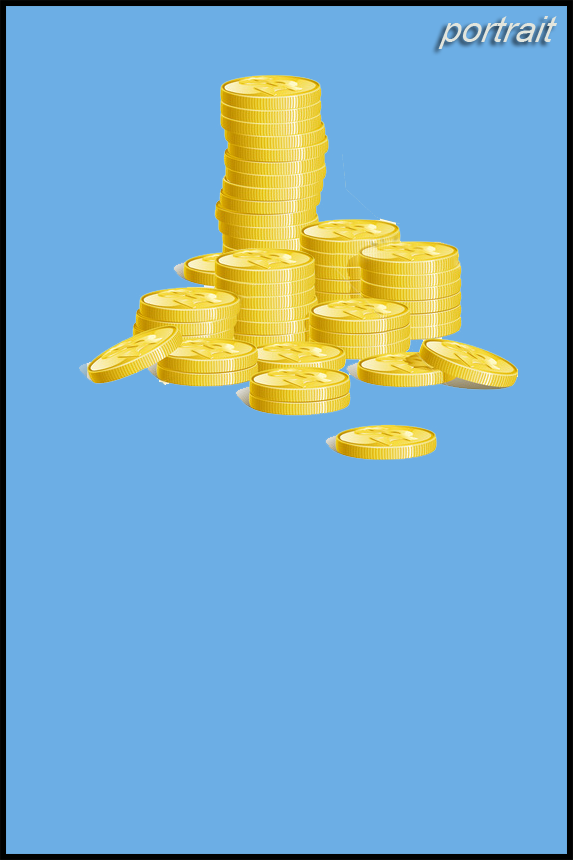
<style>
.page{position:relative;width:573px;height:860px;background:#6caee5}
.page>*{position:absolute;margin:0}
.t1{font:36px "Arial-ItalicMT";color:#e2e5dd;font-style:italic}
</style>
<div class="page">
<p class="t1" style="left:438px;top:16px;width:119px;height:33px">portrait</p>
</div>
